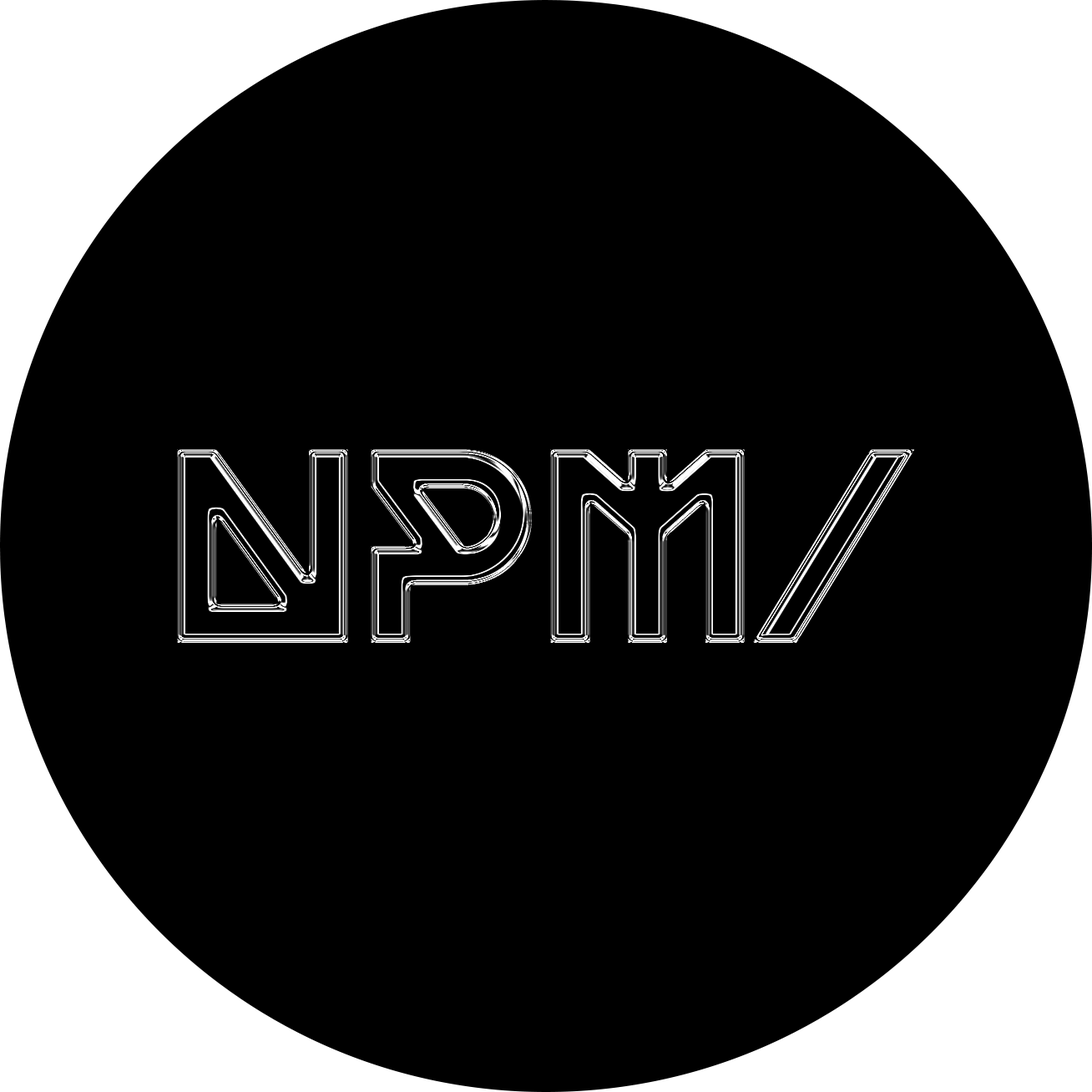
<style>
.page{position:relative;width:1092px;height:1092px;background:#000000}
.page>*{position:absolute;margin:0}
.t1{font:250.5px "Kontanter-Bold";letter-spacing:-0.025em}
</style>
<div class="page">
<p class="t1" style="left:177px;top:449px;width:737px;height:194px">npm/</p>
</div>
